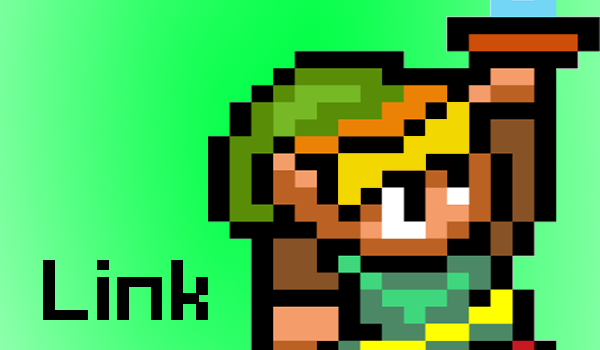
<style>
.page{position:relative;width:600px;height:350px}
.page>*{position:absolute;margin:0}
.t1{font:100px "Á¤9";letter-spacing:0.01em;color:#010101;font-weight:bold}
</style>
<div class="page">
<p class="t1" style="left:43px;top:260px;width:165px;height:60px">Link</p>
</div>
